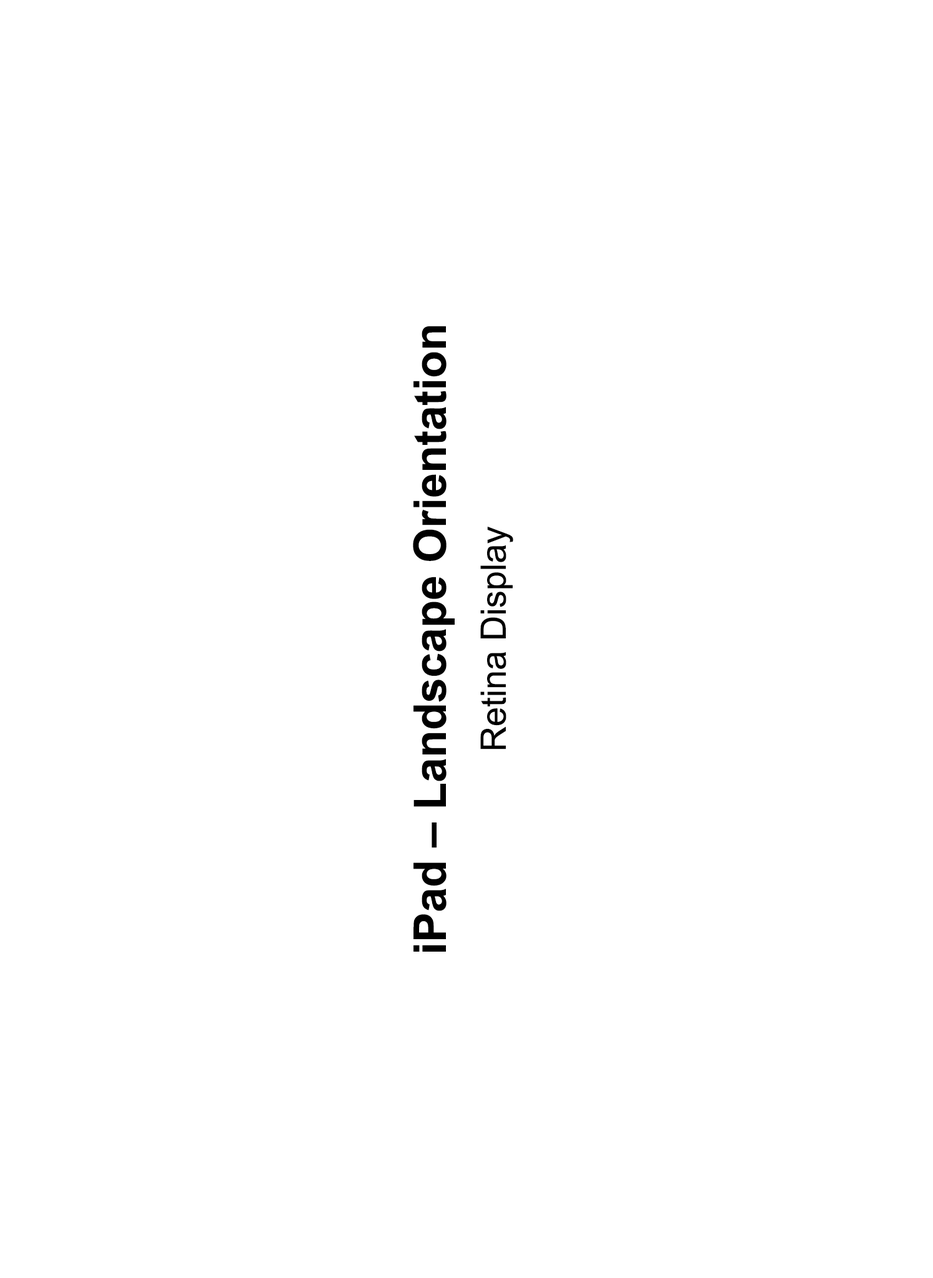
<style>
.page{position:relative;width:933px;height:1278px;background:#ffffff}
.page>*{position:absolute;margin:0}
.t1{font:44.9px/59.9px "Arial-BoldMT";color:#000000}
.t2{font:34.9px/59.9px "ArialMT";color:#000000}
</style>
<div class="page">
<p class="t1" style="left:413px;top:326px;width:100px;height:625px;text-align:center;rotate:-90deg">iPad – Landscape Orientation<br><span class="t2">Retina Display</span></p>
</div>
